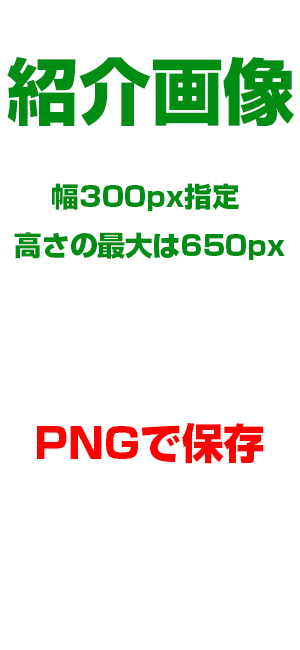
<style>
.page{position:relative;width:300px;height:650px;background:#ffffff}
.page>*{position:absolute;margin:0}
.t1{font:72px "ShinGoPr6-Heavy";color:#008d14}
.t2{font:27.6px "ShinGoPr6-Heavy";color:#008d14}
.t3{font:41.6px "ShinGoPr6-Heavy";color:#ff0000}
</style>
<div class="page">
<p class="t1" style="left:7px;top:57px;width:287px;height:69px">紹介画像</p>
<p class="t2" style="left:14px;top:183px;width:271px;height:77px;text-align:center">幅300px指定 <br>高さの最大は650px</p>
<p class="t3" style="left:37px;top:423px;width:227px;height:41px">PNGで保存</p>
</div>
